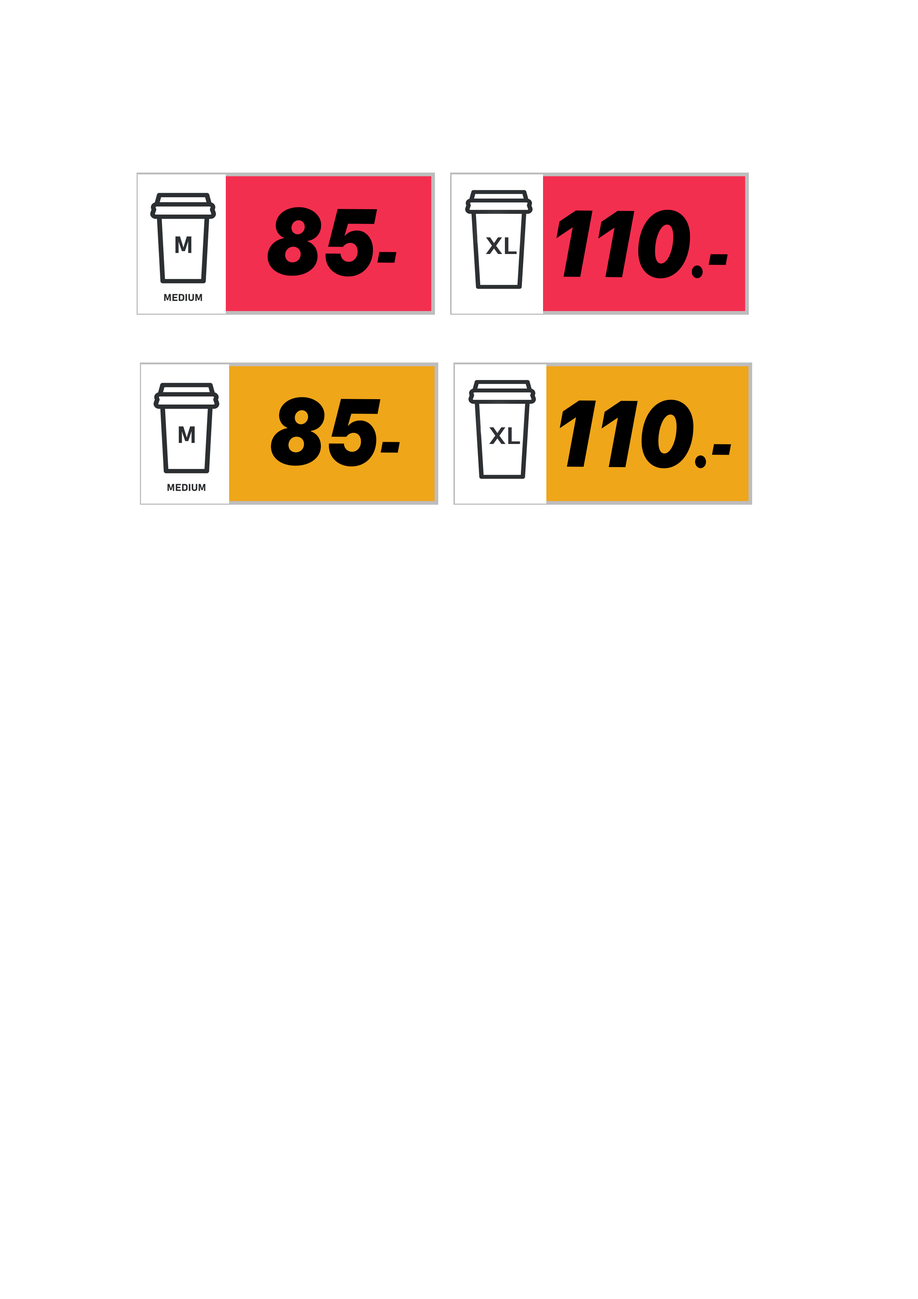
<style>
.page{position:relative;width:918px;height:1299px;background:#ffffff}
.page>*{position:absolute;margin:0}
.t1{font:94.1px "SFProDisplay-BlackItalic";color:#000000;scale:0.86 1}
.t2{font:62.8px "SFProDisplay-BlackItalic";color:#000000;scale:0.86 1}
.t3{font:25.9px "Kanit-Medium";color:#303135}
</style>
<div class="page">
<p class="t1" style="left:267px;top:207px;width:130px;height:70px">85<span class="t2">-</span></p>
<p class="t1" style="left:556px;top:210px;width:172px;height:68px">110<span class="t2">.-</span></p>
<p class="t3" style="left:486px;top:237px;width:31px;height:17px">XL</p>
<p class="t1" style="left:271px;top:397px;width:129px;height:69px">85<span class="t2">-</span></p>
<p class="t1" style="left:560px;top:399px;width:171px;height:69px">110<span class="t2">.-</span></p>
<p class="t3" style="left:489px;top:427px;width:31px;height:17px">XL</p>
</div>
